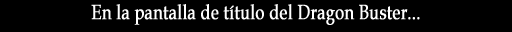
<style>
.page{position:relative;width:512px;height:32px;background:#000000}
.page>*{position:absolute;margin:0}
.t1{font:20.5px "BookAntiqua";color:#ffffff;font-weight:bold;scale:0.79 1}
</style>
<div class="page">
<p class="t1" style="left:91px;top:4px;width:329px;height:21px">En la pantalla de título del Dragon Buster...</p>
</div>
